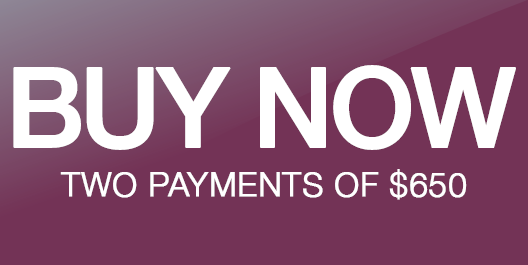
<style>
.page{position:relative;width:528px;height:265px;background:#733356}
.page>*{position:absolute;margin:0}
.t1{font:110.5px "HelveticaNeue-Medium";letter-spacing:-0.055em;color:#ffffff;font-weight:bold}
.t2{font:33.3px "HelveticaNeue-Light";color:#ffffff;font-weight:bold}
</style>
<div class="page">
<p class="t1" style="left:13px;top:65px;width:503px;height:85px">BUY NOW</p>
<p class="t2" style="left:60px;top:169px;width:407px;height:31px">TWO PAYMENTS OF $650</p>
</div>
